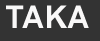
<style>
.page{position:relative;width:100px;height:41px;background:#333333}
.page>*{position:absolute;margin:0}
.t1{font:31.2px "Arial-BoldMT";color:#f9f8f8}
</style>
<div class="page">
<p class="t1" style="left:6px;top:5px;width:83px;height:23px">TAKA</p>
</div>
